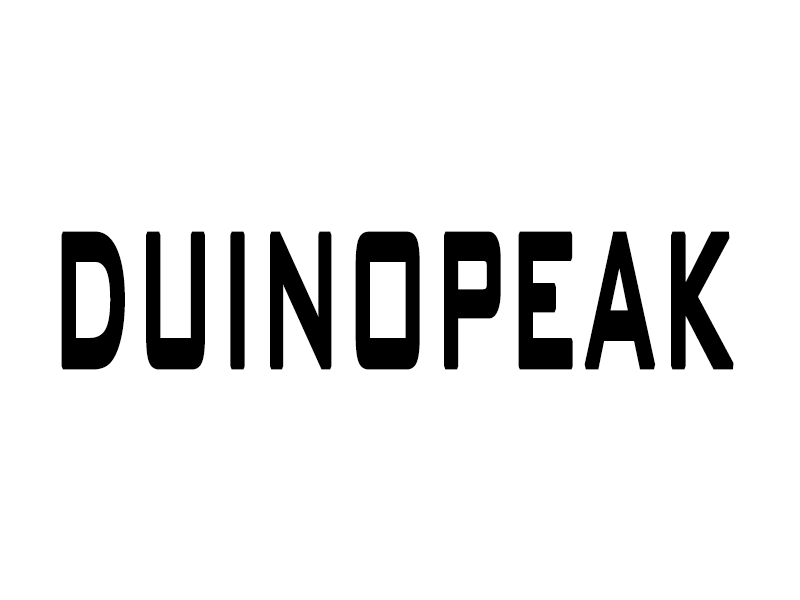
<style>
.page{position:relative;width:800px;height:600px;background:#ffffff}
.page>*{position:absolute;margin:0}
.t1{font:253.8px "BankGothic-Medium";color:#000000;font-weight:bold;scale:0.38 1}
</style>
<div class="page">
<p class="t1" style="left:61px;top:231px;width:673px;height:139px">DUINOPEAK</p>
</div>
